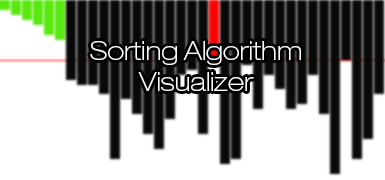
<style>
.page{position:relative;width:385px;height:180px;background:#ffffff}
.page>*{position:absolute;margin:0}
.t1{font:26px "HelveticaNeueLTPro-ThEx";color:#ffffff}
</style>
<div class="page">
<p class="t1" style="left:90px;top:41px;width:211px;height:50px;text-align:center">Sorting Algorithm<br>Visualizer</p>
</div>
